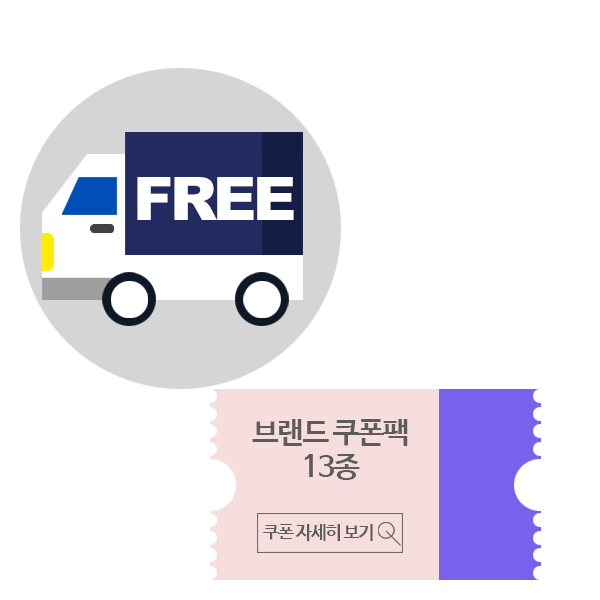
<style>
.page{position:relative;width:600px;height:600px;background:#ffffff}
.page>*{position:absolute;margin:0}
.t1{font:60px "Arial-Black";letter-spacing:-0.06em;color:#ffffff}
.t2{font:30.1px/34.1px "NanumBarunGothicBold";letter-spacing:-0.06em;color:#5d5c5a}
.t3{font:17.8px "NanumBarunGothicBold";letter-spacing:-0.06em;color:#5d5c5a}
</style>
<div class="page">
<p class="t1" style="left:137px;top:177px;width:157px;height:43px">FREE</p>
<p class="t2" style="left:252px;top:419px;width:156px;height:61px;text-align:center">브랜드 쿠폰팩<br>13종</p>
<p class="t3" style="left:263px;top:524px;width:110px;height:17px">쿠폰 자세히 보기</p>
</div>
